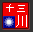
<style>
.page{position:relative;width:33px;height:32px;background:#f20000}
.page>*{position:absolute;margin:0}
.t1{font:10.4px "SimSun";color:#ffffff}
.t2{font:11.7px "SimSun";color:#ffffff}
</style>
<div class="page">
<p class="t1" style="left:6px;top:4px;width:19px;height:8px">十三</p>
<p class="t2" style="left:16px;top:15px;width:11px;height:12px">川</p>
</div>
